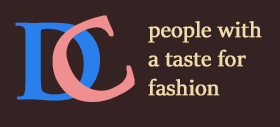
<style>
.page{position:relative;width:280px;height:127px;background:#352222}
.page>*{position:absolute;margin:0}
.t1{font:100px "TrajanPro-Bold";color:#ef8f8f;font-weight:bold}
.t2{font:100px "TrajanPro-Bold";color:#297fec;font-weight:bold}
.t3{font:24px "SitkaBanner";color:#f1daab;font-weight:bold}
</style>
<div class="page">
<p class="t1" style="left:52px;top:15px;width:83px;height:87px;rotate:-25deg">C</p>
<p class="t2" style="left:15px;top:22px;width:85px;height:79px">D</p>
<p class="t3" style="left:148px;top:21px;width:114px;height:75px">people with <br>a taste for <br>fashion</p>
</div>
